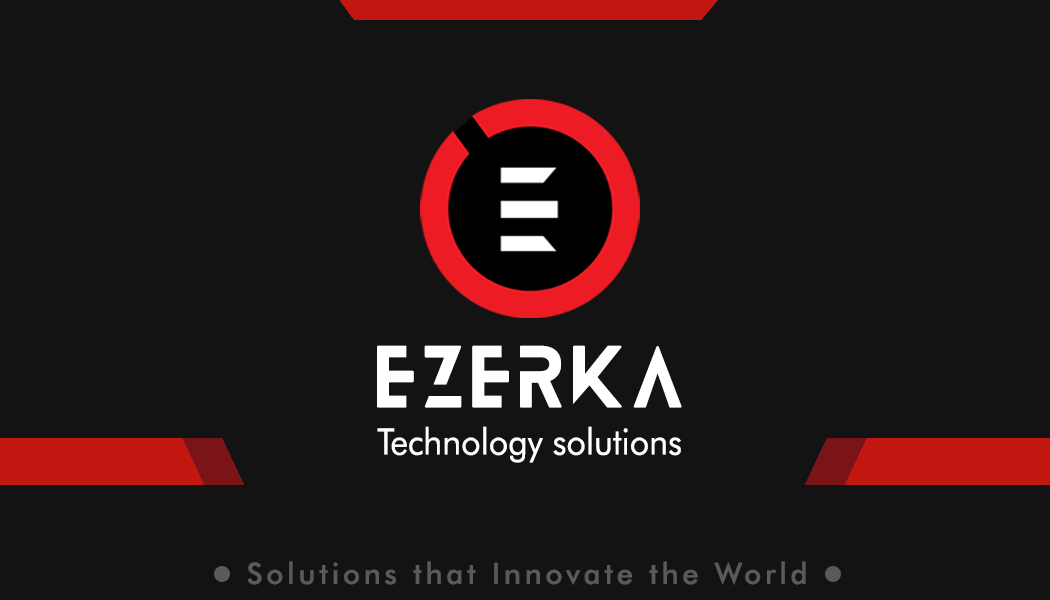
<style>
.page{position:relative;width:1050px;height:600px;background:#141313}
.page>*{position:absolute;margin:0}
.t1{font:77px "Blanka-Regular";letter-spacing:0.125em;color:#ffffff}
.t2{font:36.5px "FuturaBT-Book";color:#ffffff;scale:0.93 1}
.t3{font:29.2px "FuturaBT-Medium";letter-spacing:0.125em;color:#5b5a5a}
</style>
<div class="page">
<p class="t1" style="left:377px;top:345px;width:305px;height:63px">EZERKA</p>
<p class="t2" style="left:377px;top:426px;width:304px;height:37px">Technology solutions</p>
<p class="t3" style="left:247px;top:561px;width:559px;height:24px">Solutions that Innovate the World</p>
</div>
